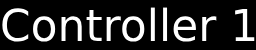
<style>
.page{position:relative;width:256px;height:50px;background:#000000}
.page>*{position:absolute;margin:0}
.t1{font:44px "DejaVuSans";color:#ffffff}
</style>
<div class="page">
<p class="t1" style="left:2px;top:7px;width:253px;height:35px">Controller 1</p>
</div>
